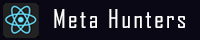
<style>
.page{position:relative;width:200px;height:40px;background:#090814}
.page>*{position:absolute;margin:0}
.t1{font:25px "AgencyFB-Reg";letter-spacing:0.1em;color:#ffffff}
</style>
<div class="page">
<p class="t1" style="left:54px;top:9px;width:131px;height:19px">Meta Hunters</p>
</div>
